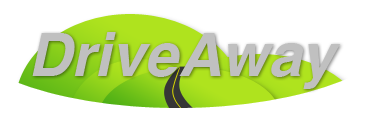
<style>
.page{position:relative;width:365px;height:121px;background:#ffffff}
.page>*{position:absolute;margin:0}
.t1{font:60px "Helvetica-BoldOblique";color:#c0c0c0}
</style>
<div class="page">
<p class="t1" style="left:32px;top:32px;width:309px;height:57px">DriveAway</p>
</div>
